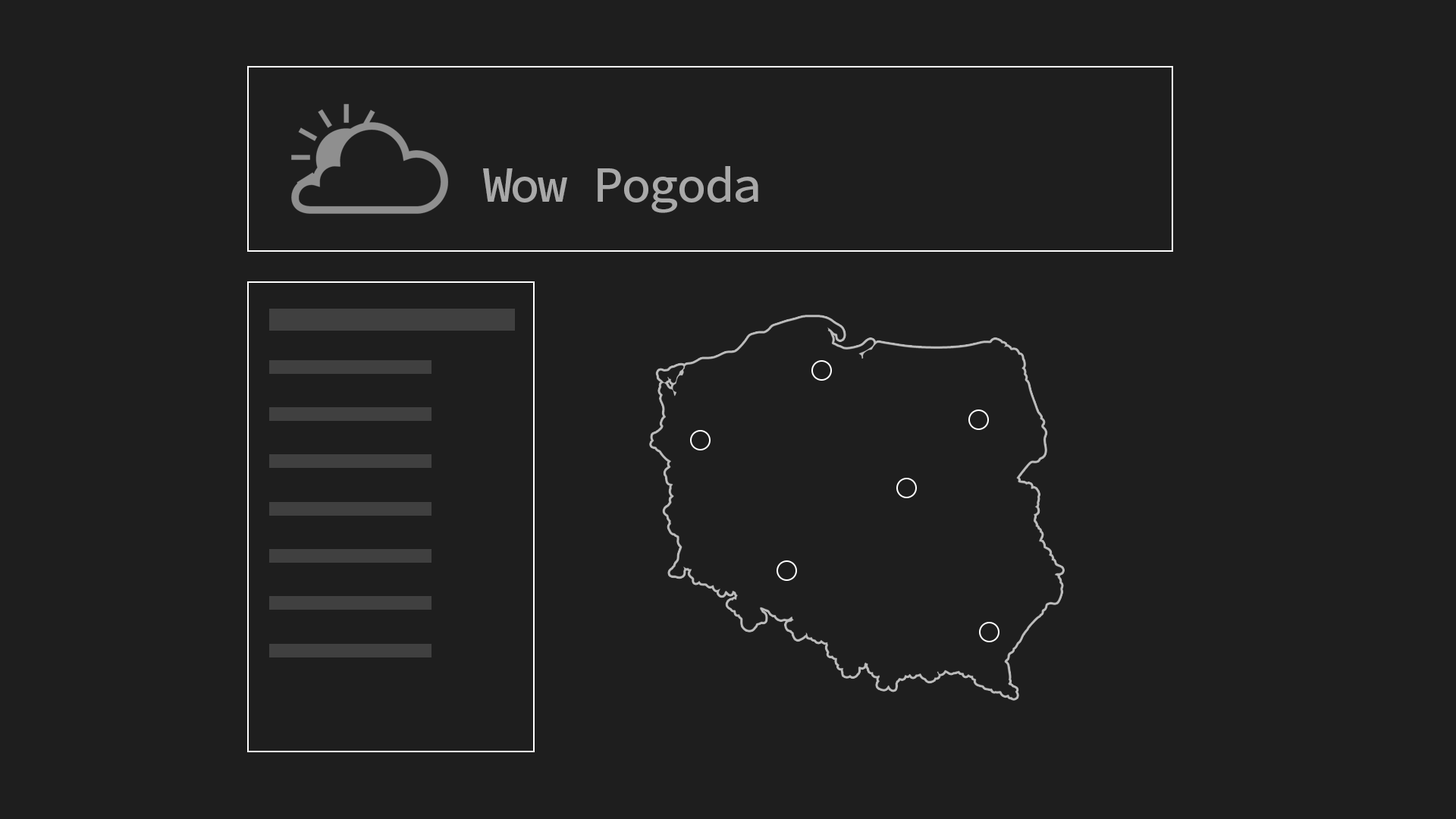
<style>
.page{position:relative;width:1456px;height:819px;background:#1e1e1e}
.page>*{position:absolute;margin:0}
.t1{font:50.5px "SourceCodePro-Medium";letter-spacing:-0.05em;color:#a9a9a9}
</style>
<div class="page">
<p class="t1" style="left:483px;top:166px;width:275px;height:47px">Wow Pogoda</p>
</div>
